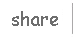
<style>
.page{position:relative;width:73px;height:37px;background:#ffffff}
.page>*{position:absolute;margin:0}
.t1{font:18.7px "ComicSansMS";color:#6e6e6e}
</style>
<div class="page">
<p class="t1" style="left:12px;top:11px;width:46px;height:15px">share</p>
</div>
